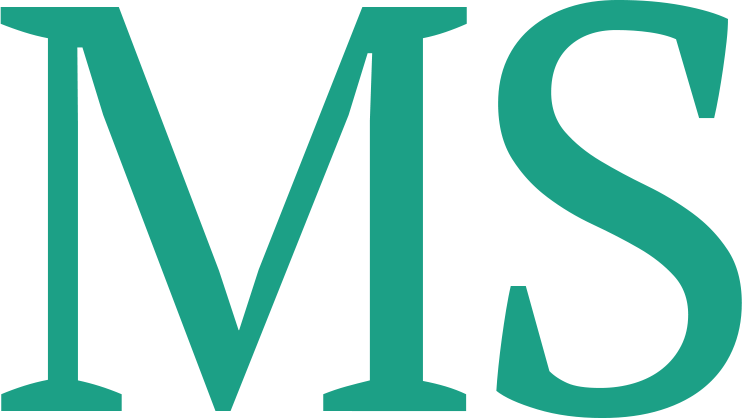
<style>
.page{position:relative;width:742px;height:418px;background:#ffffff}
.page>*{position:absolute;margin:0}
.t1{font:576.7px "PTSerif-Regular";letter-spacing:-0.035em;color:#1ca086}
</style>
<div class="page">
<p class="t1" style="left:0px;top:0px;width:742px;height:418px">MS</p>
</div>
